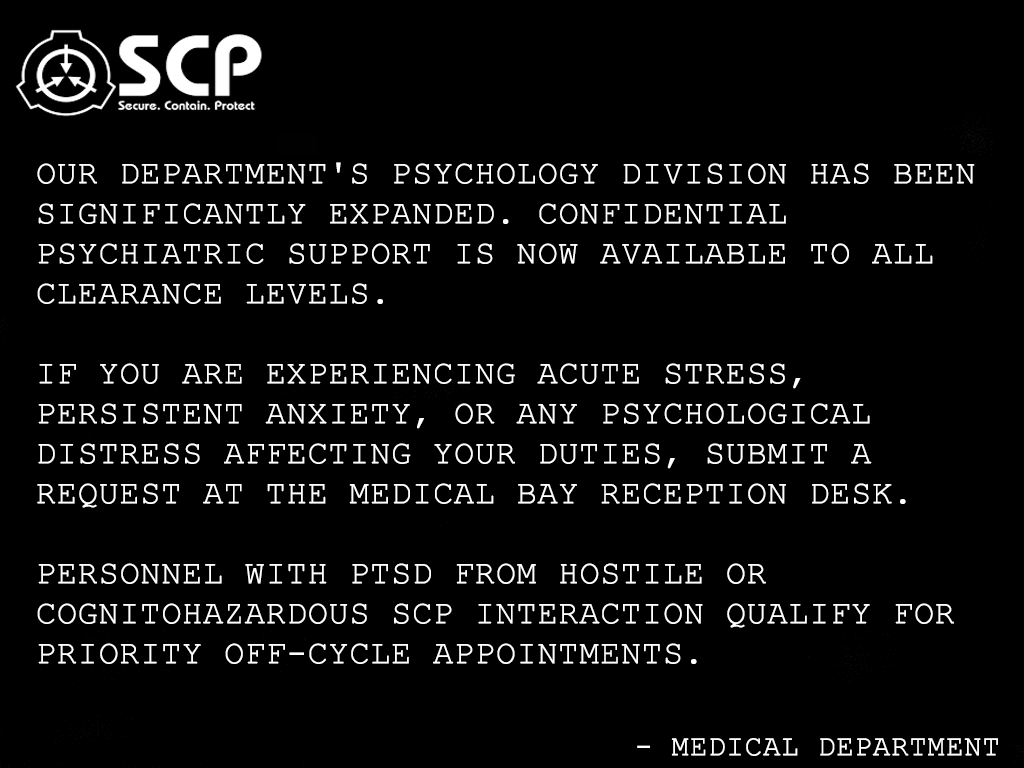
<style>
.page{position:relative;width:1024px;height:768px;background:#000000}
.page>*{position:absolute;margin:0}
.t1{font:33.3px "CourierNewPSMT";color:#ffffff;text-transform:uppercase;font-weight:bold}
.t2{font:29.2px "CourierNewPSMT";color:#ffffff;text-transform:uppercase;font-weight:bold}
</style>
<div class="page">
<p class="t1" style="left:37px;top:162px;width:938px;height:502px;text-align:justify"><span class="t2"><br></span>Our Department's Psychology Division has been significantly expanded. Confidential psychiatric support is now available to all clearance levels.<br><br>If you are experiencing acute stress, persistent anxiety, or any psychological distress affecting your duties, submit a request at the Medical Bay reception desk.<br><br>Personnel with PTSD from hostile or cognitohazardous SCP interaction qualify for priority off-cycle appointments.</p>
<p class="t2" style="left:637px;top:738px;width:361px;height:18px">- Medical Department</p>
</div>
